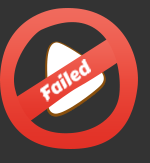
<style>
.page{position:relative;width:150px;height:163px;background:#333333}
.page>*{position:absolute;margin:0}
.t1{font:18.6px "CarterOne";color:#ffffff}
</style>
<div class="page">
<p class="t1" style="left:40px;top:59px;width:51px;height:43px;rotate:-33deg">Failed</p>
</div>
